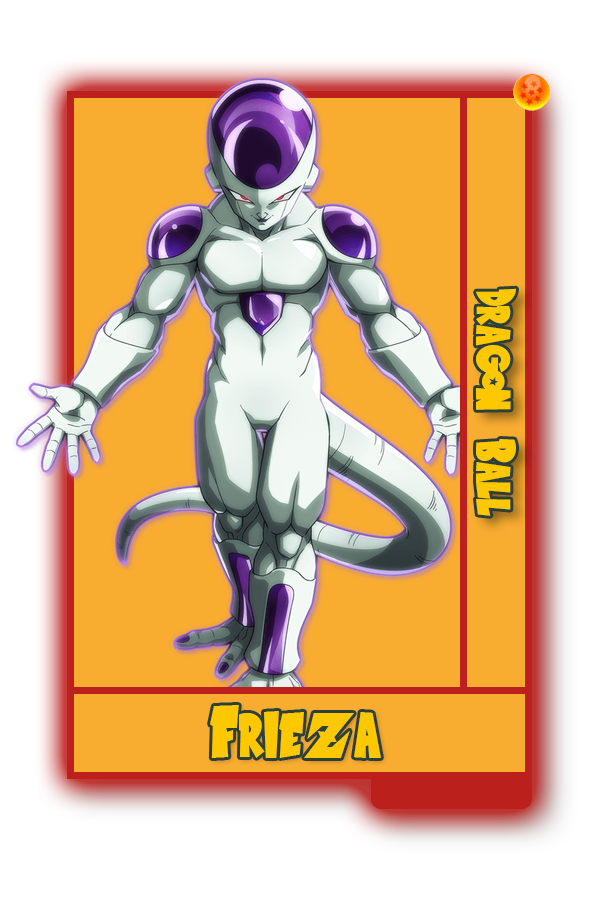
<style>
.page{position:relative;width:600px;height:900px;background:#f8ac30}
.page>*{position:absolute;margin:0}
.t1{font:56.9px "SaiyanSans";color:#fec800}
.t2{font:75px "SaiyanSans";color:#fec800}
</style>
<div class="page">
<p class="t1" style="left:476px;top:288px;width:40px;height:228px;rotate:90deg">Dragon Ball</p>
<p class="t2" style="left:210px;top:705px;width:171px;height:53px">Frieza</p>
</div>
